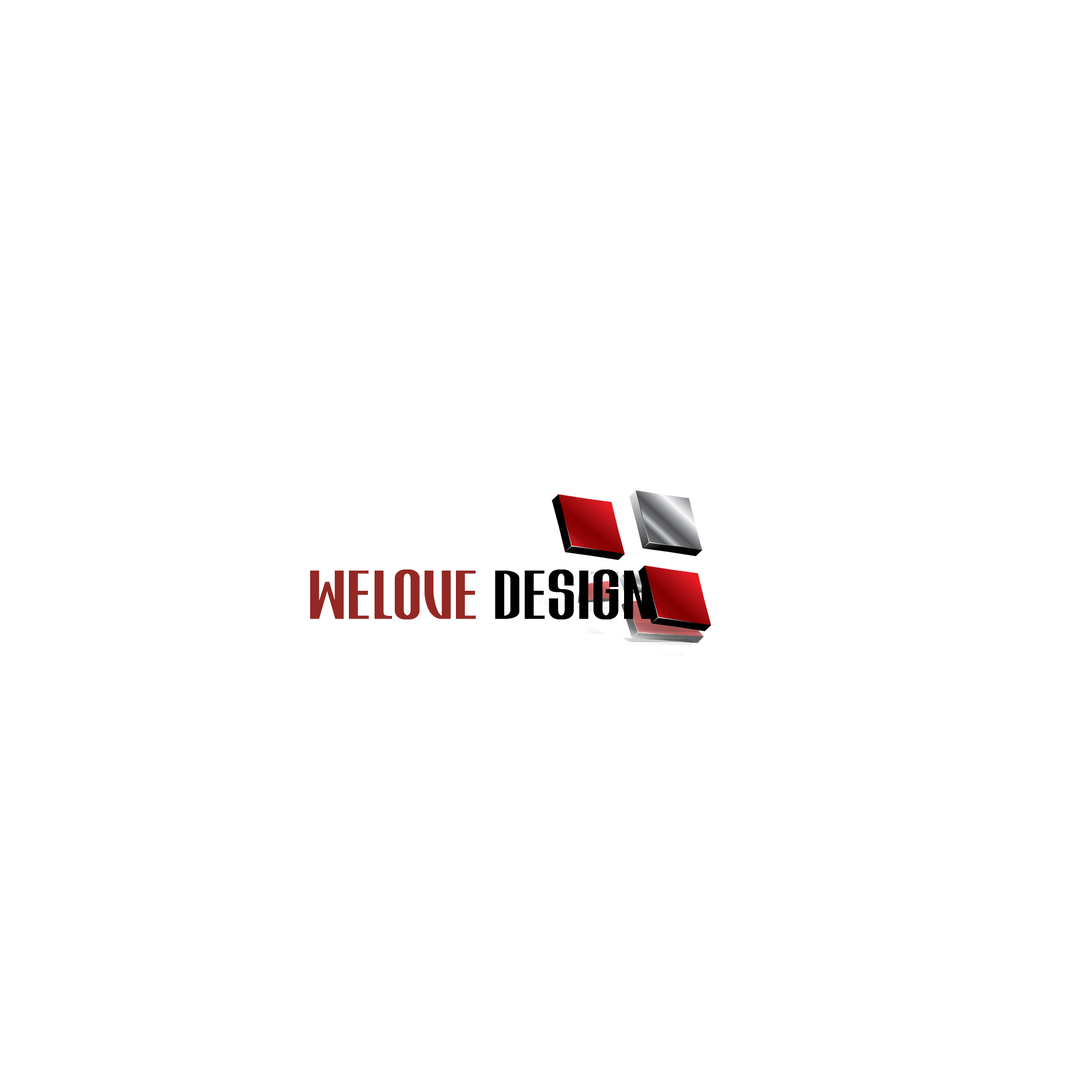
<style>
.page{position:relative;width:1092px;height:1092px;background:#ffffff}
.page>*{position:absolute;margin:0}
.t1{font:54.6px "Atvice-Bold";color:#942824;font-weight:bold}
.t2{font:54.6px "Atvice-Bold";color:#000001;font-weight:bold}
</style>
<div class="page">
<p class="t1" style="left:310px;top:569px;width:341px;height:51px">WELOVE <span class="t2">DESIGN</span></p>
</div>
